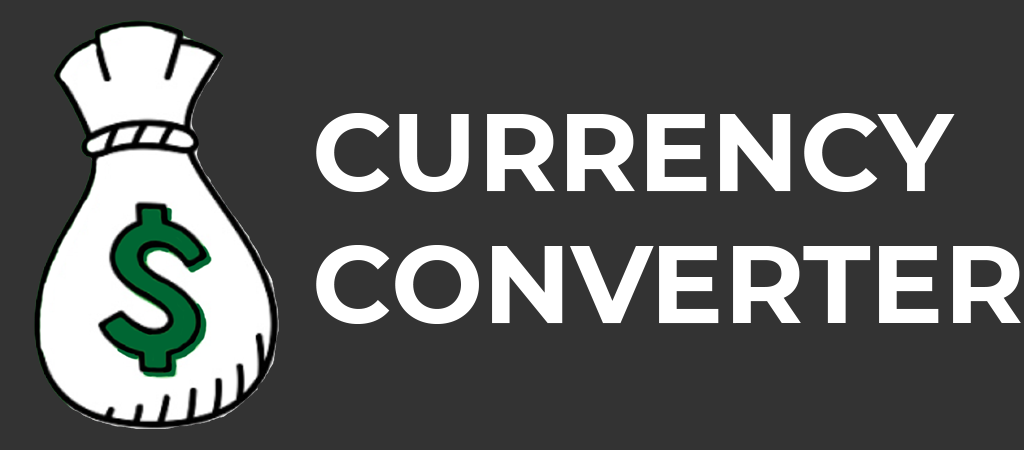
<style>
.page{position:relative;width:1024px;height:450px;background:#333333}
.page>*{position:absolute;margin:0}
.t1{font:109.4px "Montserrat-Bold";color:#ffffff}
</style>
<div class="page">
<p class="t1" style="left:316px;top:113px;width:705px;height:211px">CURRENCY<br>CONVERTER</p>
</div>
